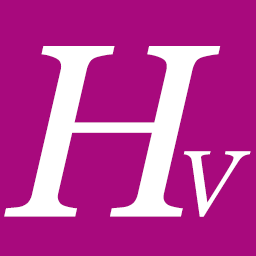
<style>
.page{position:relative;width:256px;height:256px;background:#a8097d}
.page>*{position:absolute;margin:0}
.t1{font:245.9px "Georgia-Italic";color:#ffffff}
.t2{font:93.4px "Georgia-Italic";color:#ffffff}
</style>
<div class="page">
<p class="t1" style="left:4px;top:46px;width:217px;height:171px">H</p>
<p class="t2" style="left:183px;top:151px;width:68px;height:66px">V</p>
</div>
